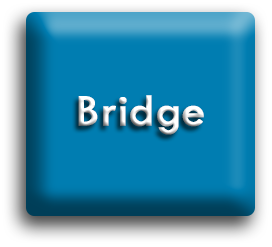
<style>
.page{position:relative;width:272px;height:247px;background:#007db1}
.page>*{position:absolute;margin:0}
.t1{font:46.8px "TwCenMT-Regular";font-weight:bold}
</style>
<div class="page">
<p class="t1" style="left:78px;top:95px;width:126px;height:40px">Bridge</p>
</div>
